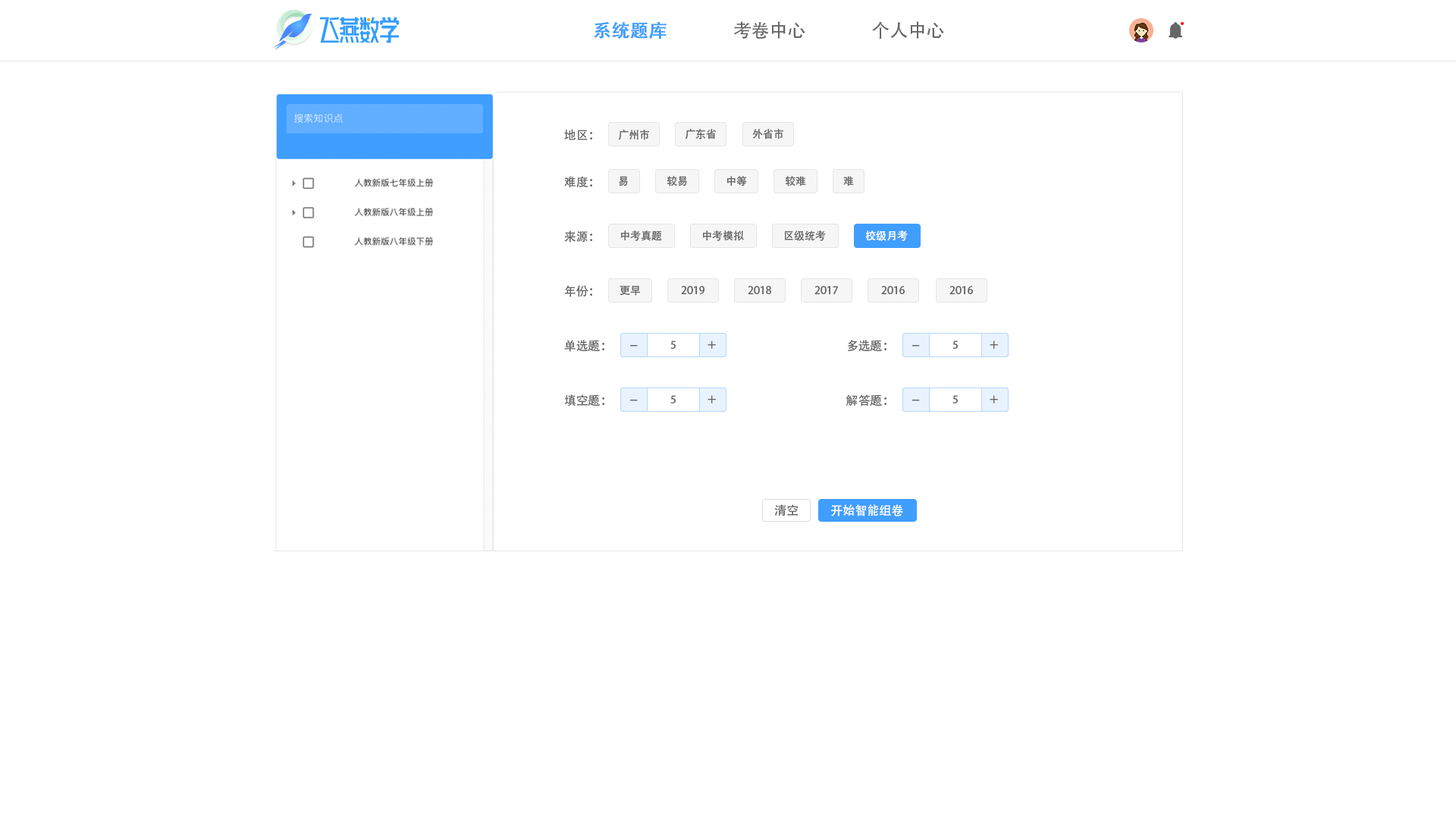
<style>
.page{position:relative;width:1456px;height:819px;background:#ffffff}
.page>*{position:absolute;margin:0}
.t1{font:18.2px "AdobeHeitiStd-Regular";color:#409eff;font-weight:bold}
.t2{font:18.2px "AdobeHeitiStd-Regular";color:#666666}
.t3{font:12.1px "AdobeHeitiStd-Regular";color:#666666}
.t4{font:10.6px "AdobeHeitiStd-Regular";color:#666666}
.t5{font:10.6px "AdobeHeitiStd-Regular";color:#ffffff}
.t6{font:14.4px "AdobeHeitiStd-Regular";color:#666666}
.t7{font:12.1px "AdobeHeitiStd-Regular";color:#ffffff}
</style>
<div class="page">
<p class="t1" style="left:594px;top:22px;width:73px;height:17px">系统题库</p>
<p class="t2" style="left:733px;top:21px;width:72px;height:18px">考卷中心</p>
<p class="t2" style="left:872px;top:21px;width:72px;height:18px">个人中心</p>
<p class="t3" style="left:564px;top:129px;width:28px;height:11px">地区：</p>
<p class="t4" style="left:618px;top:129px;width:31px;height:11px">广州市</p>
<p class="t4" style="left:685px;top:128px;width:32px;height:12px">广东省</p>
<p class="t4" style="left:752px;top:128px;width:31px;height:12px">外省市</p>
<p class="t3" style="left:564px;top:176px;width:28px;height:12px">难度：</p>
<p class="t4" style="left:619px;top:176px;width:9px;height:11px">易</p>
<p class="t4" style="left:667px;top:176px;width:20px;height:11px">较易</p>
<p class="t4" style="left:726px;top:176px;width:21px;height:10px">中等</p>
<p class="t4" style="left:786px;top:176px;width:20px;height:11px">较难</p>
<p class="t4" style="left:843px;top:176px;width:11px;height:11px">难</p>
<p class="t3" style="left:564px;top:231px;width:28px;height:12px">来源：</p>
<p class="t4" style="left:620px;top:231px;width:42px;height:10px">中考真题</p>
<p class="t4" style="left:702px;top:231px;width:42px;height:10px">中考模拟</p>
<p class="t4" style="left:785px;top:231px;width:41px;height:10px">区级统考</p>
<p class="t5" style="left:865px;top:231px;width:43px;height:10px">校级月考</p>
<p class="t3" style="left:564px;top:285px;width:28px;height:12px">年份：</p>
<p class="t4" style="left:620px;top:285px;width:20px;height:11px">更早</p>
<p class="t4" style="left:681px;top:286px;width:23px;height:8px">2019</p>
<p class="t4" style="left:748px;top:286px;width:23px;height:8px">2018</p>
<p class="t4" style="left:814px;top:286px;width:24px;height:8px">2017</p>
<p class="t4" style="left:881px;top:286px;width:24px;height:8px">2016</p>
<p class="t4" style="left:949px;top:286px;width:24px;height:8px">2016</p>
<p class="t3" style="left:564px;top:340px;width:40px;height:12px">单选题：</p>
<p class="t4" style="left:670px;top:340px;width:6px;height:9px">5</p>
<p class="t4" style="left:708px;top:340px;width:8px;height:9px">＋</p>
<p class="t3" style="left:847px;top:340px;width:39px;height:11px">多选题：</p>
<p class="t4" style="left:952px;top:340px;width:6px;height:9px">5</p>
<p class="t4" style="left:990px;top:340px;width:8px;height:9px">＋</p>
<p class="t6" style="left:630px;top:345px;width:8px;height:2px">–</p>
<p class="t6" style="left:912px;top:345px;width:8px;height:2px">–</p>
<p class="t3" style="left:564px;top:394px;width:40px;height:12px">填空题：</p>
<p class="t6" style="left:630px;top:400px;width:8px;height:1px">–</p>
<p class="t4" style="left:670px;top:395px;width:6px;height:8px">5</p>
<p class="t4" style="left:708px;top:395px;width:8px;height:8px">＋</p>
<p class="t3" style="left:846px;top:394px;width:40px;height:12px">解答题：</p>
<p class="t6" style="left:912px;top:400px;width:8px;height:1px">–</p>
<p class="t4" style="left:952px;top:395px;width:6px;height:8px">5</p>
<p class="t4" style="left:990px;top:395px;width:8px;height:8px">＋</p>
<p class="t3" style="left:774px;top:504px;width:25px;height:12px">清空</p>
<p class="t7" style="left:831px;top:504px;width:72px;height:12px">开始智能组卷</p>
</div>
